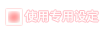
<style>
.page{position:relative;width:100px;height:30px;background:#ffffff}
.page>*{position:absolute;margin:0}
.t1{font:12px "SourceHanSansSC-Regular";color:#fffcfc;font-weight:bold}
</style>
<div class="page">
<p class="t1" style="left:25px;top:10px;width:74px;height:12px">使用专用设定</p>
</div>
